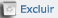
<style>
.page{position:relative;width:58px;height:18px;background:#eff0f1}
.page>*{position:absolute;margin:0}
.t1{font:10px "Verdana";color:#336ca1}
</style>
<div class="page">
<p class="t1" style="left:21px;top:5px;width:33px;height:8px">Excluir</p>
</div>
